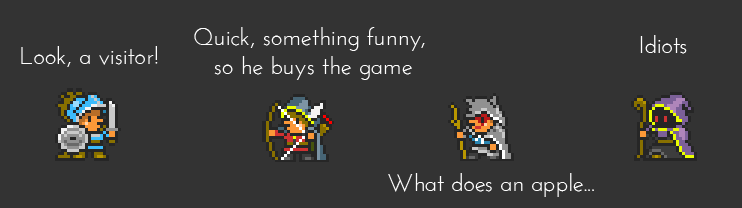
<style>
.page{position:relative;width:742px;height:208px;background:#333333}
.page>*{position:absolute;margin:0}
.t1{font:24px "JosefinSans";color:#ffffff}
</style>
<div class="page">
<p class="t1" style="left:194px;top:27px;width:231px;height:53px;text-align:center">Quick, something funny, <br>so he buys the game</p>
<p class="t1" style="left:640px;top:35px;width:47px;height:19px">Idiots</p>
<p class="t1" style="left:21px;top:46px;width:137px;height:21px">Look, a visitor!</p>
<p class="t1" style="left:388px;top:173px;width:206px;height:24px">What does an apple...</p>
</div>
